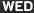
<style>
.page{position:relative;width:34px;height:13px}
.page>*{position:absolute;margin:0}
.t1{font:13.9px "K2D-ExtraBold";color:#ffffff}
</style>
<div class="page">
<p class="t1" style="left:2px;top:1px;width:31px;height:11px">WED</p>
</div>
